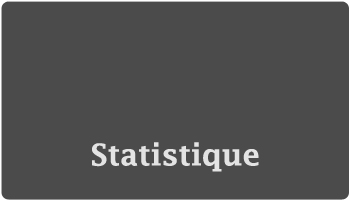
<style>
.page{position:relative;width:350px;height:200px;background:#4c4b4b}
.page>*{position:absolute;margin:0}
.t1{font:30px "LucidaFax-Demi";color:#e3e3e3}
</style>
<div class="page">
<p class="t1" style="left:92px;top:142px;width:167px;height:30px">Statistique</p>
</div>
